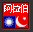
<style>
.page{position:relative;width:33px;height:32px;background:#333333}
.page>*{position:absolute;margin:0}
.t1{font:10.4px "SimSun";letter-spacing:-0.25em;color:#ffffff}
</style>
<div class="page">
<p class="t1" style="left:4px;top:4px;width:24px;height:9px">阿拉伯</p>
</div>
